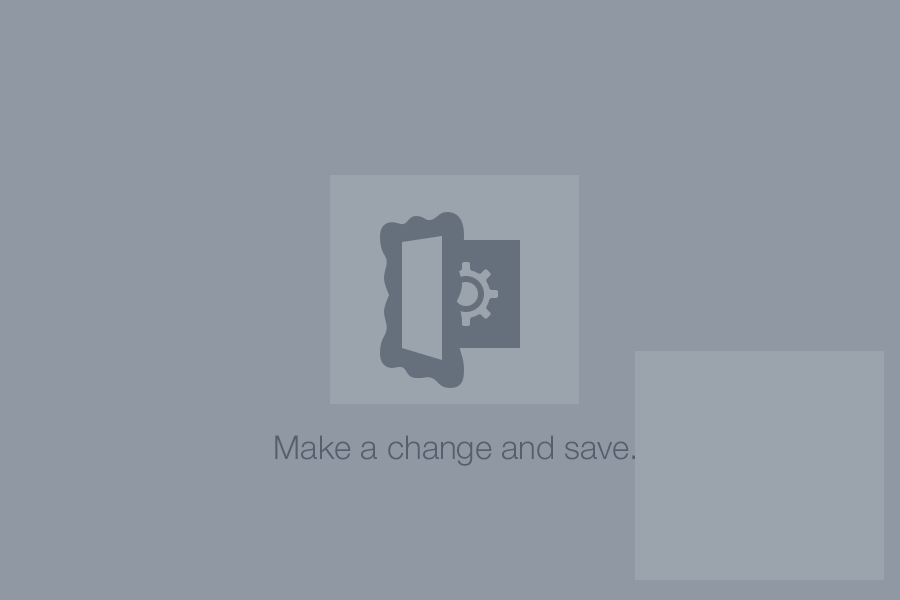
<style>
.page{position:relative;width:900px;height:600px;background:#9099a3}
.page>*{position:absolute;margin:0}
.t1{font:33px "HelveticaNeue-Light";color:#55606e}
</style>
<div class="page">
<p class="t1" style="left:275px;top:435px;width:360px;height:31px">Make a change and save.</p>
</div>
